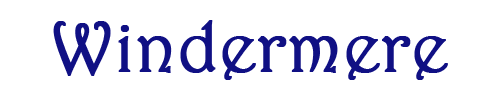
<style>
.page{position:relative;width:500px;height:100px;background:#ffffff}
.page>*{position:absolute;margin:0}
.t1{font:72px "Harrington";color:#101084;font-weight:bold}
</style>
<div class="page">
<p class="t1" style="left:53px;top:20px;width:395px;height:60px">Windermere</p>
</div>
